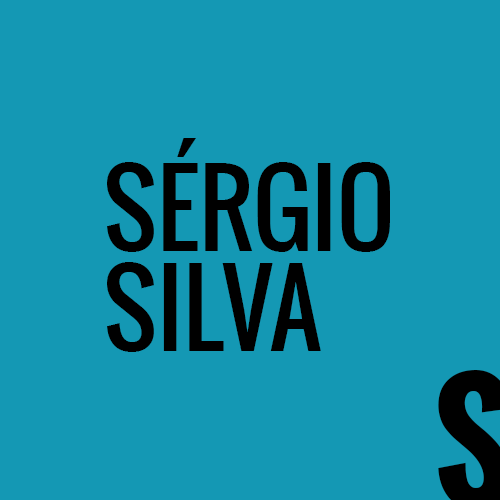
<style>
.page{position:relative;width:500px;height:500px;background:#1498b4}
.page>*{position:absolute;margin:0}
.t1{font:99.6px "Oswald-Regular";color:#000000}
</style>
<div class="page">
<p class="t1" style="left:107px;top:138px;width:283px;height:114px">SÉRGIO</p>
<p class="t1" style="left:107px;top:262px;width:214px;height:90px">SILVA</p>
</div>
